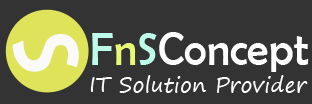
<style>
.page{position:relative;width:312px;height:104px;background:#333333}
.page>*{position:absolute;margin:0}
.t1{font:92px "BerlinSansFB-Reg";color:#fafafa}
.t2{font:46.1px "BerlinSansFB-Reg";color:#ffffff;scale:0.96 1}
.t3{font:46.1px "BerlinSansFB-Reg";color:#befcea;scale:0.96 1}
.t4{font:46.1px "BerlinSansFB-Reg";color:#e7f878;scale:0.96 1}
.t5{font:21.4px "SegoePrint";color:#ffffff}
</style>
<div class="page">
<p class="t1" style="left:12px;top:34px;width:67px;height:38px;rotate:80deg">S</p>
<p class="t2" style="left:92px;top:32px;width:217px;height:40px"><span class="t3">F</span><span class="t4">n</span><span class="t3">S</span>Concept</p>
<p class="t5" style="left:90px;top:75px;width:218px;height:18px">IT Solution Provider</p>
</div>
